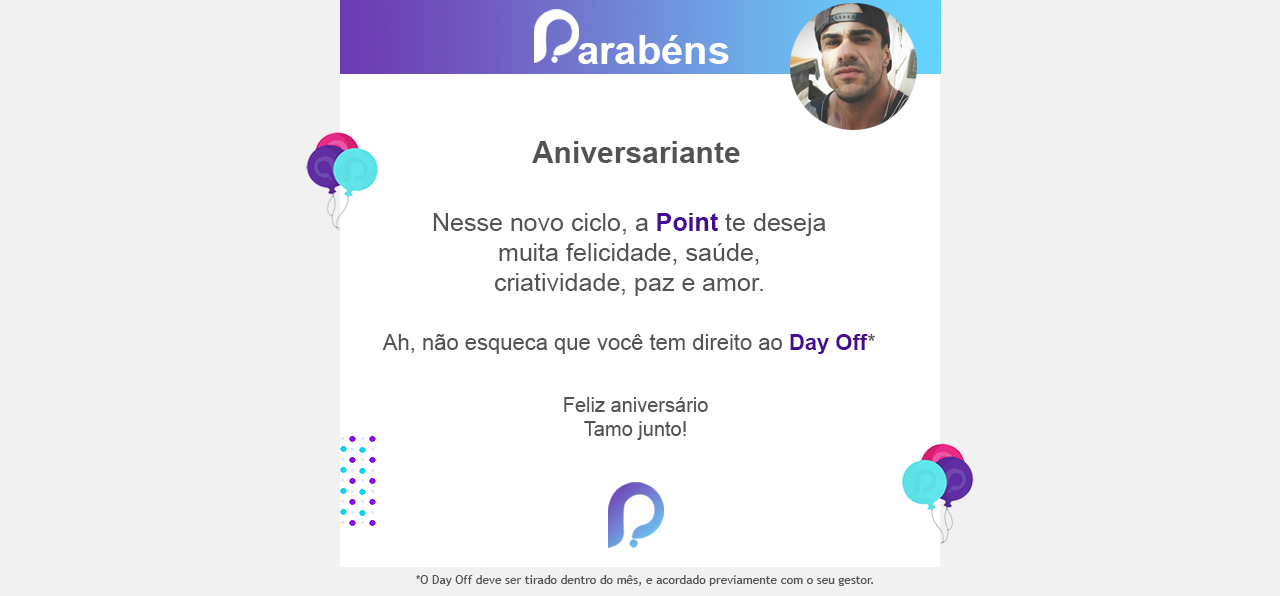
<style>
.page{position:relative;width:1280px;height:596px;background:#f1f1f1}
.page>*{position:absolute;margin:0}
.t1{font:40px "Arial-BoldMT";color:#ffffff}
.t2{font:30px "Arial-BoldMT";color:#535353}
.t3{font:25px/30px "ArialMT";color:#535353}
.t4{font:25px/30px "Arial-BoldMT";color:#460b93}
.t5{font:22px "ArialMT";color:#535353}
.t6{font:22px "Arial-BoldMT";color:#460b93}
.t7{font:20px/24px "ArialMT";color:#535353}
.t8{font:12px "TrebuchetMS";color:#535353}
</style>
<div class="page">
<p class="t1" style="left:578px;top:35px;width:151px;height:29px">arabéns</p>
<p class="t2" style="left:532px;top:141px;width:208px;height:22px">Aniversariante</p>
<p class="t3" style="left:433px;top:213px;width:393px;height:83px;text-align:center">Nesse novo ciclo, a <span class="t4">Point</span> te deseja<br>muita felicidade, saúde,<br>criatividade, paz e amor.</p>
<p class="t5" style="left:382px;top:334px;width:493px;height:20px">Ah, não esqueca que você tem direito ao <span class="t6">Day Off</span>*</p>
<p class="t7" style="left:564px;top:397px;width:144px;height:43px;text-align:center">Feliz aniversário<br>Tamo junto!</p>
<p class="t8" style="left:416px;top:575px;width:457px;height:11px">*O Day Off deve ser tirado dentro do mês, e acordado previamente com o seu gestor.</p>
</div>
